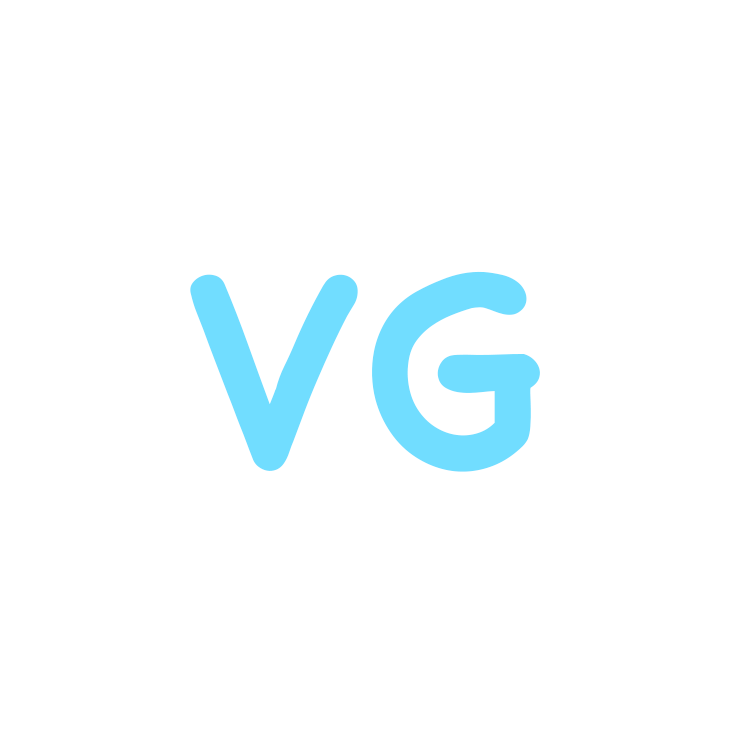
<style>
.page{position:relative;width:730px;height:730px;background:#ffffff}
.page>*{position:absolute;margin:0}
.t1{font:266.8px "ChalkboardSE-Bold";color:#71ddff}
</style>
<div class="page">
<p class="t1" style="left:190px;top:271px;width:350px;height:201px">VG</p>
</div>
